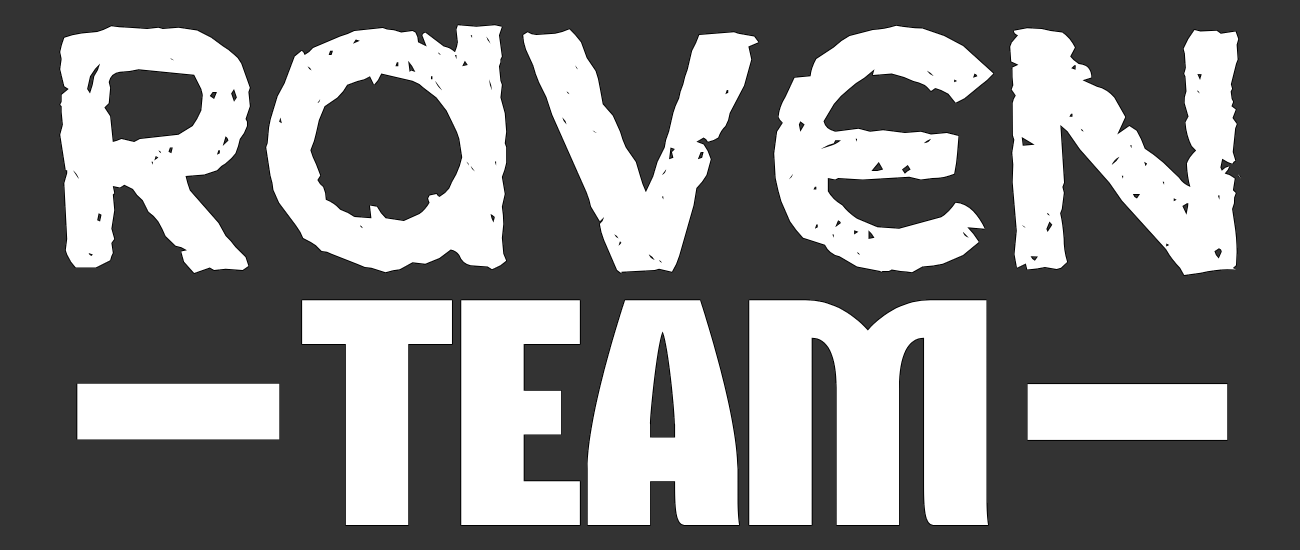
<style>
.page{position:relative;width:1300px;height:550px;background:#333333}
.page>*{position:absolute;margin:0}
.t1{font:420.7px "Xenophone";color:#ffffff}
.t2{font:312.2px "Mikodacs";color:#ffffff}
</style>
<div class="page">
<p class="t1" style="left:60px;top:25px;width:1181px;height:250px">RAVEN</p>
<p class="t2" style="left:302px;top:300px;width:686px;height:225px">TEAM</p>
</div>
